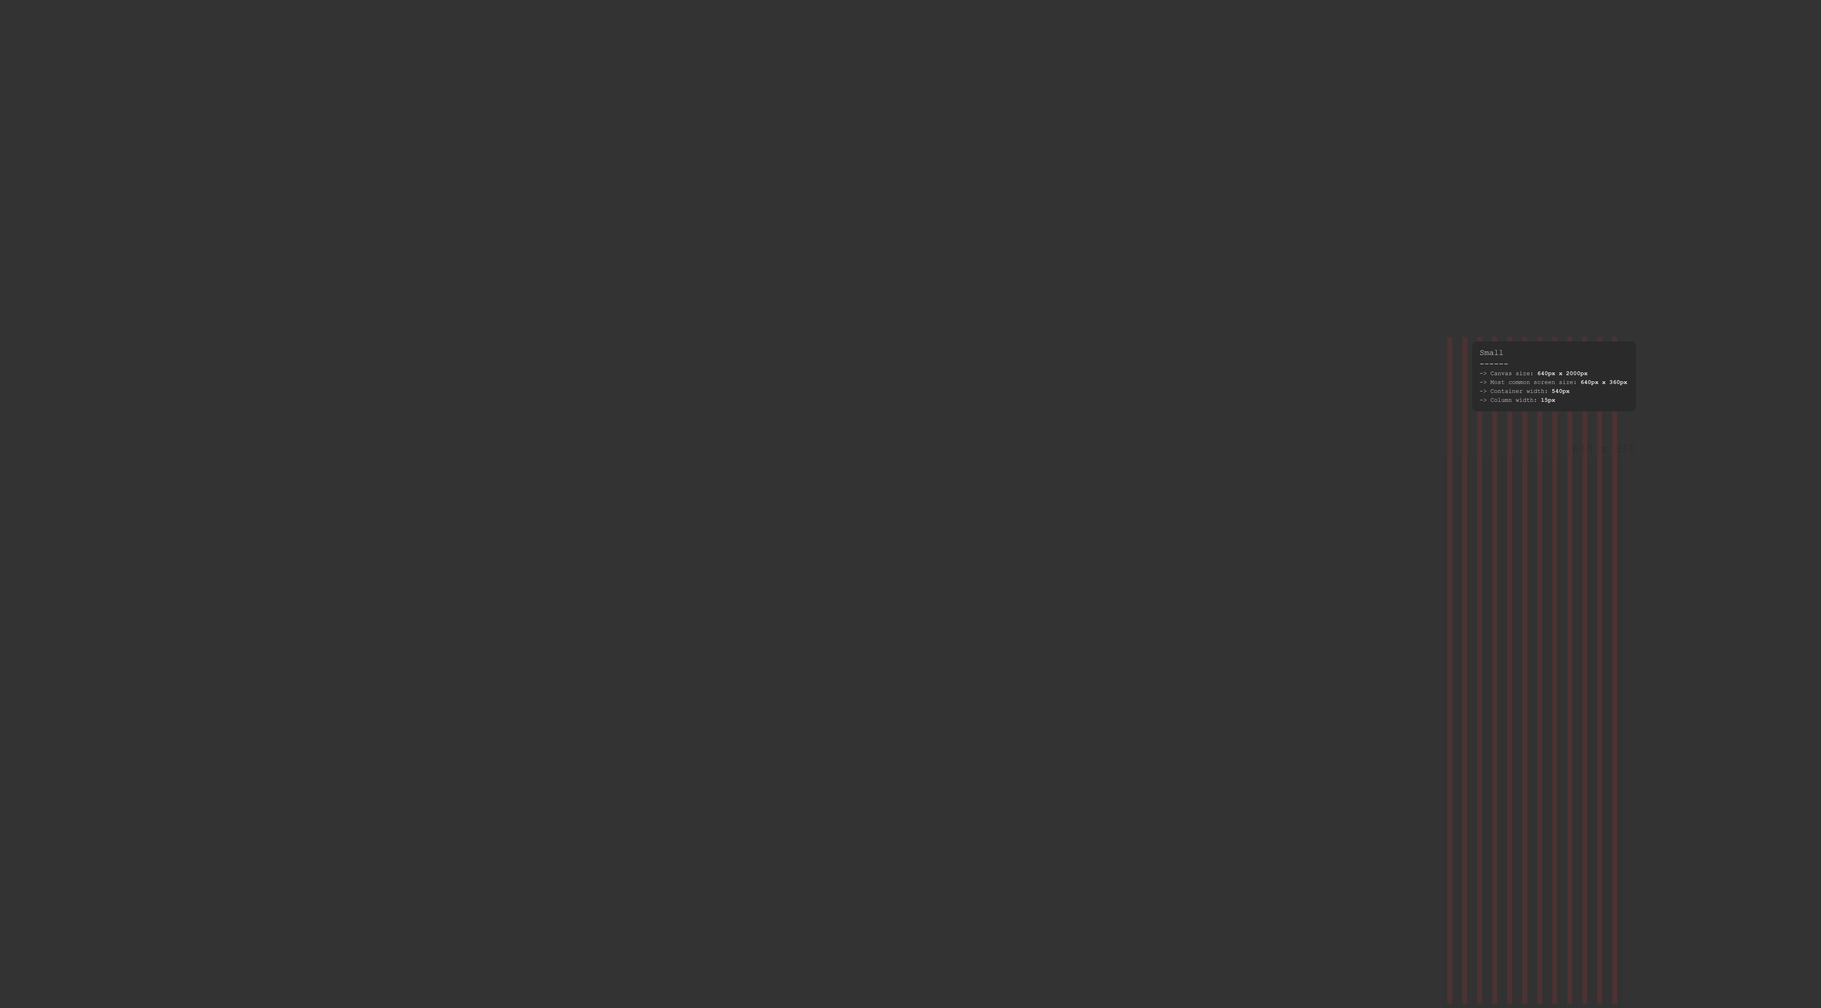
<style>
.page{position:relative;width:1821px;height:1008px;background:#333333}
.page>*{position:absolute;margin:0}
.t1{font:6px "CourierNewPSMT";color:#dedede}
.t2{font:8px "CourierNewPSMT";color:#dedede}
.t3{font:6px "CourierNewPS-BoldMT";color:#dedede}
.t4{font:12px "CourierNewPSMT";color:#292929}
</style>
<div class="page">
<p class="t1" style="left:1480px;top:350px;width:147px;height:53px"><span class="t2">Small<br>------<br></span>-&gt; Canvas size: <span class="t3">640px x 2000px<br></span>-&gt; Most common screen size:<span class="t3"> 640px x 360px<br></span>-&gt; Container width: <span class="t3">540px<br></span>-&gt; Column width: <span class="t3">15px</span></p>
<p class="t4" style="left:1573px;top:445px;width:62px;height:8px">640 x 360</p>
</div>
